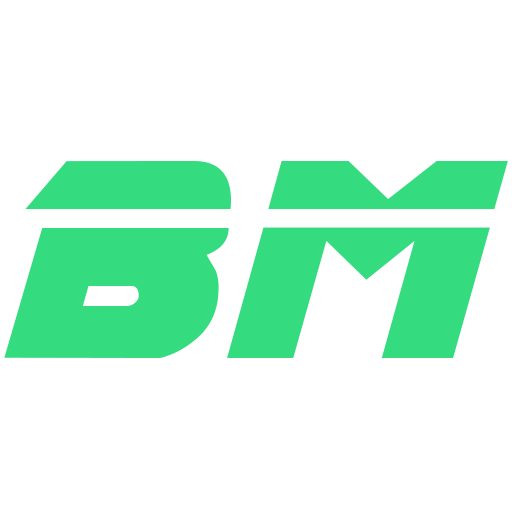
<style>
.page{position:relative;width:512px;height:512px;background:#ffffff}
.page>*{position:absolute;margin:0}
.t1{font:285.4px "BladeRunnerMovieFont";color:#35db7f}
</style>
<div class="page">
<p class="t1" style="left:4px;top:161px;width:504px;height:197px">BM</p>
</div>
